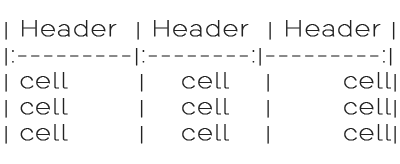
<style>
.page{position:relative;width:400px;height:164px;background:#ffffff}
.page>*{position:absolute;margin:0}
.t1{font:21.7px "Raleway-Thin";letter-spacing:0.05em;color:#222222;font-weight:bold;scale:1.2 1}
</style>
<div class="page">
<p class="t1" style="left:5px;top:20px;width:391px;height:124px">| Header  | Header  | Header |<br>|:---------|:--------:|---------:|<br>| cell        |    cell    |        cell|<br>| cell        |    cell    |        cell|<br>| cell        |    cell    |        cell|</p>
</div>
